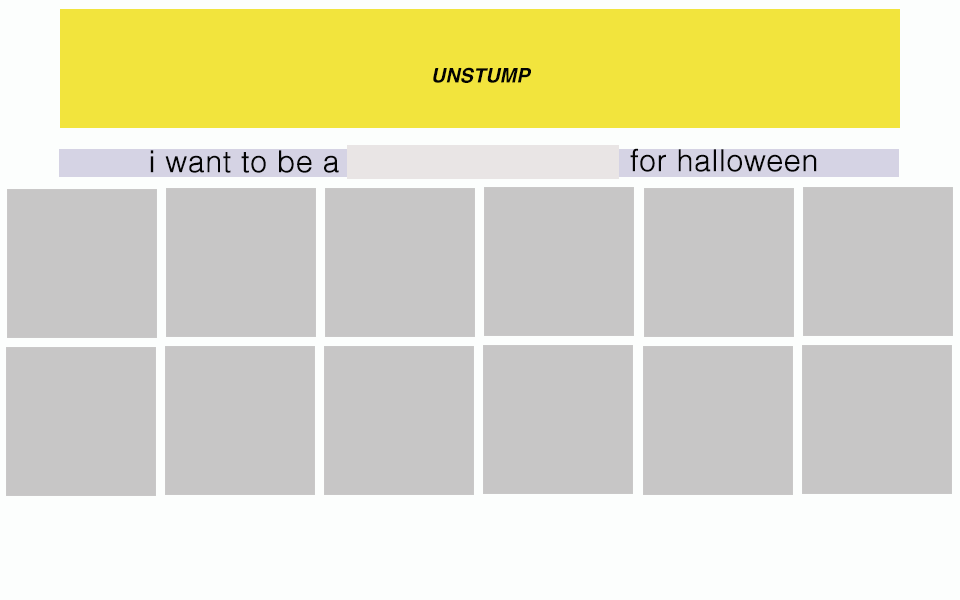
<style>
.page{position:relative;width:960px;height:600px;background:#c7c6c6}
.page>*{position:absolute;margin:0}
.t1{font:20px "Helvetica-BoldOblique";color:#030303}
.t2{font:30px "Helvetica-Light";color:#030303;font-weight:bold}
</style>
<div class="page">
<p class="t1" style="left:433px;top:67px;width:98px;height:16px">UNSTUMP</p>
<p class="t2" style="left:150px;top:150px;width:189px;height:23px">i want to be a</p>
<p class="t2" style="left:630px;top:148px;width:187px;height:24px">for halloween</p>
</div>
